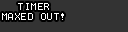
<style>
.page{position:relative;width:128px;height:32px;background:#333333}
.page>*{position:absolute;margin:0}
.t1{font:8px/10px "Terminal";letter-spacing:0.2em;color:#ffffff}
</style>
<div class="page">
<p class="t1" style="left:2px;top:3px;width:62px;height:17px;text-align:center">TIMER<br>MAXED OUT!</p>
</div>
